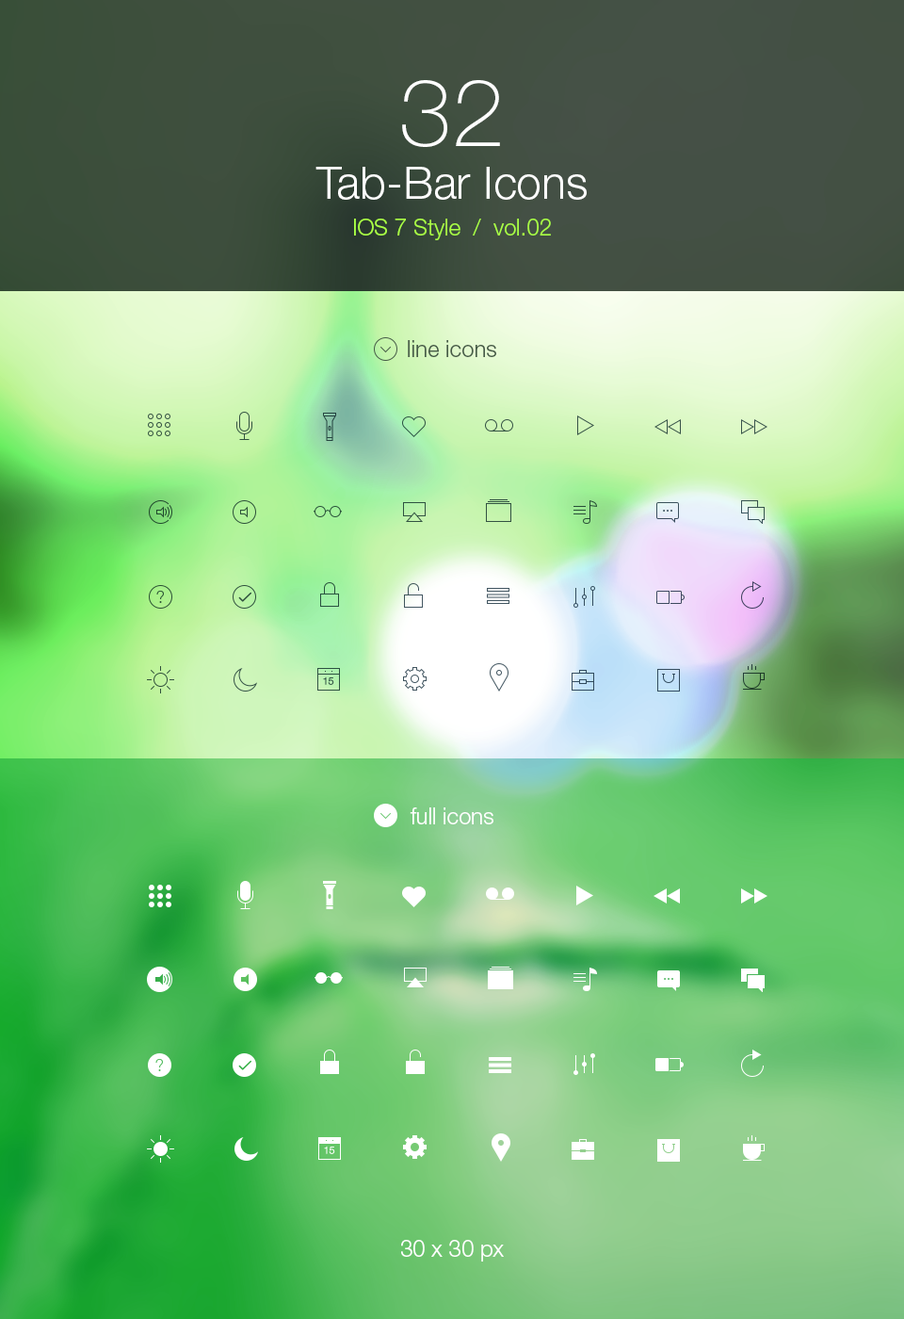
<style>
.page{position:relative;width:904px;height:1319px}
.page>*{position:absolute;margin:0}
.t1{font:22.6px/36.7px "HelveticaNeueLTStd-Lt";color:#a9ff45}
.t2{font:94.2px/47.1px "HelveticaNeueLTStd-Th";color:#ffffff}
.t3{font:45.2px/52.7px "HelveticaNeueLTStd-Lt";color:#ffffff}
.t4{font:22.6px "HelveticaNeueLTStd-Lt";color:#465b47}
.t5{font:22.6px "HelveticaNeueLTStd-Lt";color:#ffffff}
</style>
<div class="page">
<p class="t1" style="left:316px;top:80px;width:271px;height:160px;text-align:center"><span class="t2">32<br></span><span class="t3">Tab-Bar Icons<br></span>IOS 7 Style  /  vol.02</p>
<p class="t4" style="left:408px;top:340px;width:88px;height:17px">line icons</p>
<p class="t5" style="left:410px;top:807px;width:84px;height:17px">full icons</p>
<p class="t5" style="left:401px;top:1240px;width:103px;height:21px">30 x 30 px</p>
</div>
